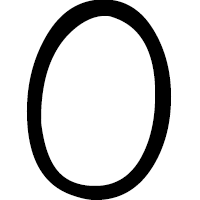
<style>
.page{position:relative;width:200px;height:200px;background:#ffffff}
.page>*{position:absolute;margin:0}
.t1{font:225px "Noteworthy-Light";color:#000000}
</style>
<div class="page">
<p class="t1" style="left:26px;top:0px;width:146px;height:200px">O</p>
</div>
